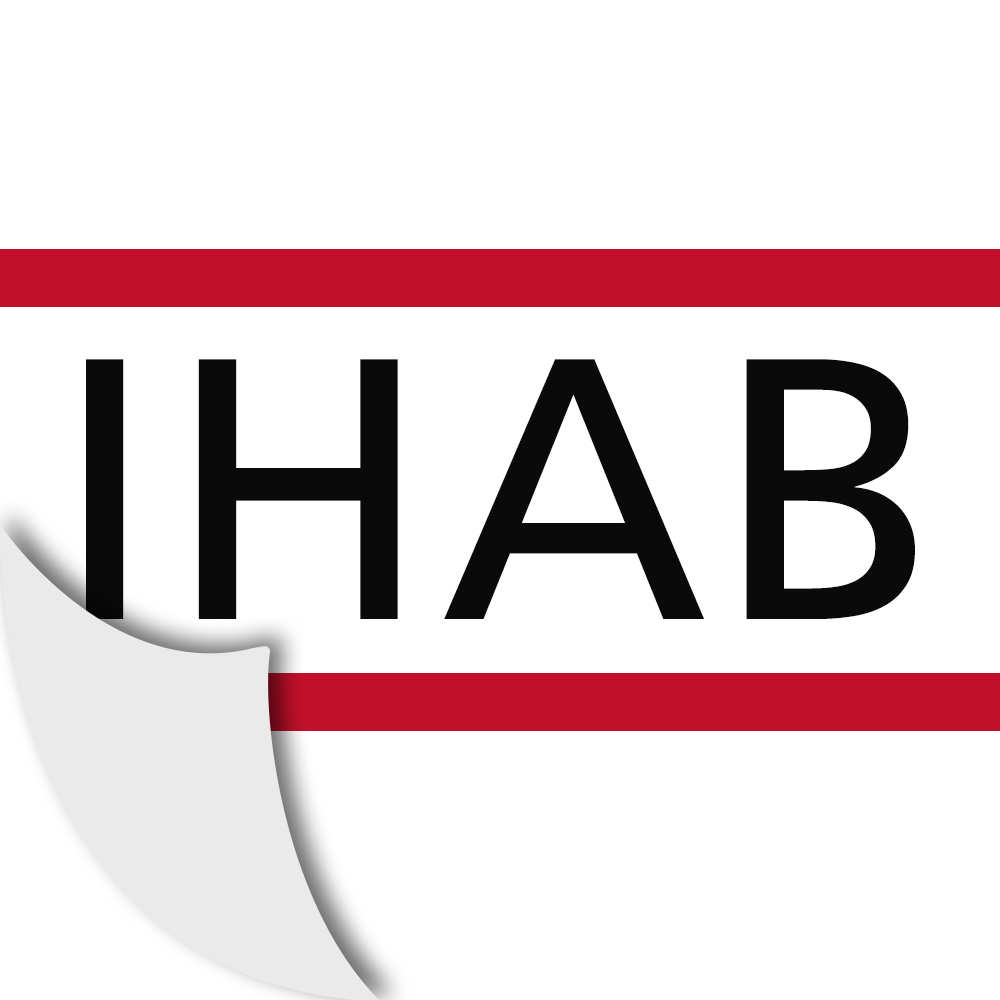
<style>
.page{position:relative;width:1000px;height:1000px;background:#ffffff}
.page>*{position:absolute;margin:0}
.t1{font:372px "NDSFrutiger-Roman";letter-spacing:0.02em;color:#0a0a0a}
</style>
<div class="page">
<p class="t1" style="left:86px;top:359px;width:829px;height:260px">IHAB</p>
</div>
